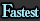
<style>
.page{position:relative;width:40px;height:21px;background:#333333}
.page>*{position:absolute;margin:0}
.t1{font:13px "RyuminPro-ExBold";letter-spacing:-0.1em;color:#aeedfe}
.t2{font:17px "RyuminPro-ExBold";letter-spacing:-0.1em;color:#aeedfe}
</style>
<div class="page">
<p class="t1" style="left:2px;top:4px;width:37px;height:14px"><span class="t2">F</span>astest</p>
</div>
